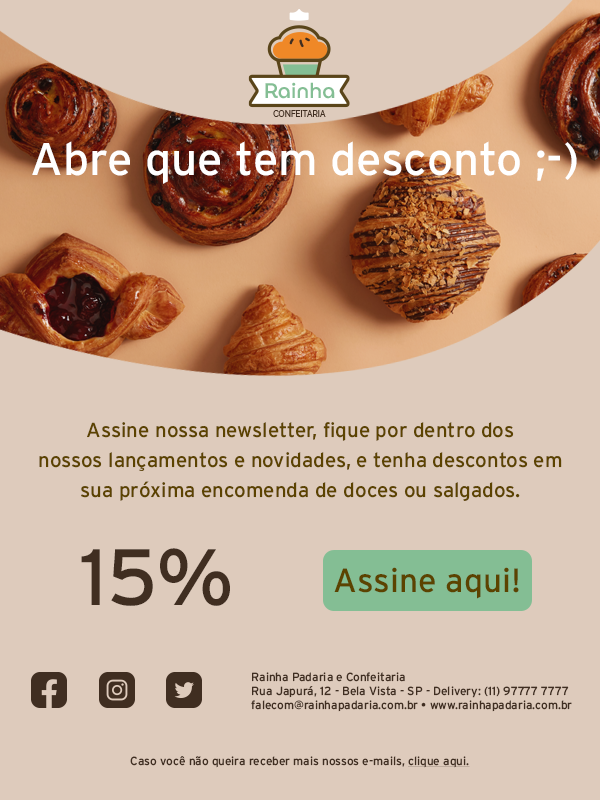
<style>
.page{position:relative;width:600px;height:800px;background:#decbbc}
.page>*{position:absolute;margin:0}
.t1{font:45.9px "Interstate-Regular";color:#ffffff}
.t2{font:20.4px/30px "Interstate-Regular";color:#5c4300}
.t3{font:79.7px "Interstate-Regular";color:#402e21}
.t4{font:11.8px "Interstate-Regular";color:#402e21}
.t5{font:11.8px "Interstate-Regular";color:#402e21;text-decoration:underline}
</style>
<div class="page">
<p class="t1" style="left:32px;top:141px;width:545px;height:43px">Abre que tem desconto ;-)</p>
<p class="t2" style="left:39px;top:422px;width:523px;height:79px;text-align:center">Assine nossa newsletter, fique por dentro dos<br>nossos lançamentos e novidades, e tenha descontos em<br>sua próxima encomenda de doces ou salgados.</p>
<p class="t3" style="left:81px;top:548px;width:149px;height:58px">15%</p>
<p class="t4" style="left:251px;top:672px;width:321px;height:40px">Rainha Padaria e Confeitaria<br>Rua Japurá, 12 - Bela Vista - SP - Delivery: (11) 97777 7777<br>falecom@rainhapadaria.com.br • www.rainhapadaria.com.br</p>
<p class="t4" style="left:130px;top:756px;width:340px;height:12px">Caso você não queira receber mais nossos e-mails, <span class="t5">clique aqui.</span></p>
</div>
